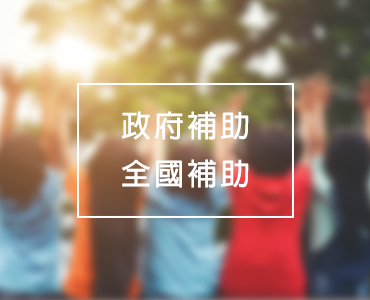
<style>
.page{position:relative;width:370px;height:300px}
.page>*{position:absolute;margin:0}
.t1{font:30px/48px "AdobeFanHeitiStd-Bold";letter-spacing:0.1em;color:#ffffff}
</style>
<div class="page">
<p class="t1" style="left:121px;top:111px;width:128px;height:77px">政府補助<br>全國補助</p>
</div>
